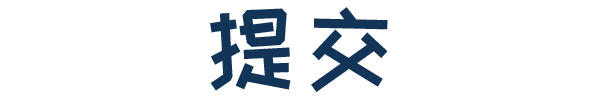
<style>
.page{position:relative;width:600px;height:100px;background:#ffffff}
.page>*{position:absolute;margin:0}
.t1{font:98.6px "HappyZcool-2016";color:#123456}
</style>
<div class="page">
<p class="t1" style="left:210px;top:7px;width:178px;height:85px">提交</p>
</div>
